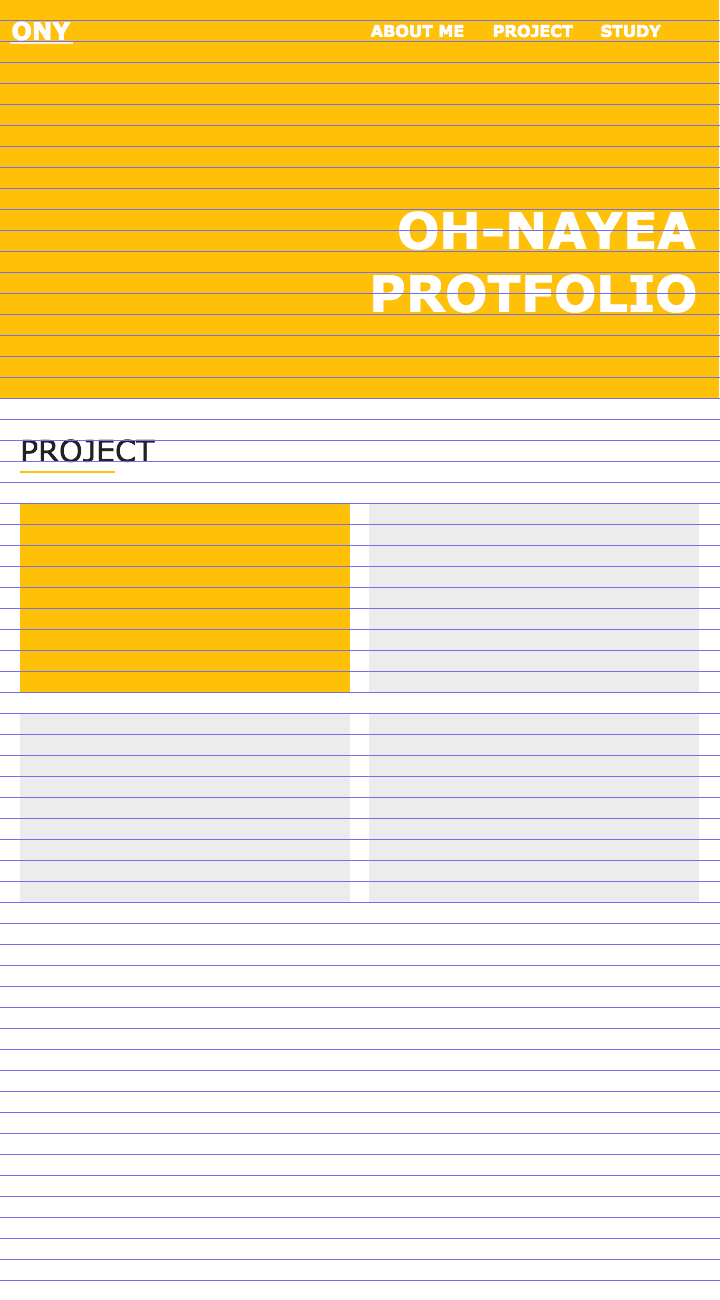
<style>
.page{position:relative;width:720px;height:1300px;background:#ffffff}
.page>*{position:absolute;margin:0}
.t1{font:24px "Verdana-Bold";color:#ffffff}
.t2{font:16px "Verdana-Bold";color:#ffffff}
.t3{font:50px "Verdana-Bold";color:#ffffff}
.t4{font:30px "Verdana";color:#222222}
</style>
<div class="page">
<p class="t1" style="left:12px;top:21px;width:59px;height:20px">ONY</p>
<p class="t2" style="left:370px;top:24px;width:94px;height:14px">ABOUT ME</p>
<p class="t2" style="left:493px;top:24px;width:80px;height:14px">PROJECT</p>
<p class="t2" style="left:601px;top:24px;width:60px;height:14px">STUDY</p>
<p class="t3" style="left:399px;top:211px;width:297px;height:39px">OH-NAYEA</p>
<p class="t3" style="left:373px;top:274px;width:323px;height:39px">PROTFOLIO</p>
<p class="t4" style="left:22px;top:439px;width:133px;height:24px">PROJECT</p>
</div>
